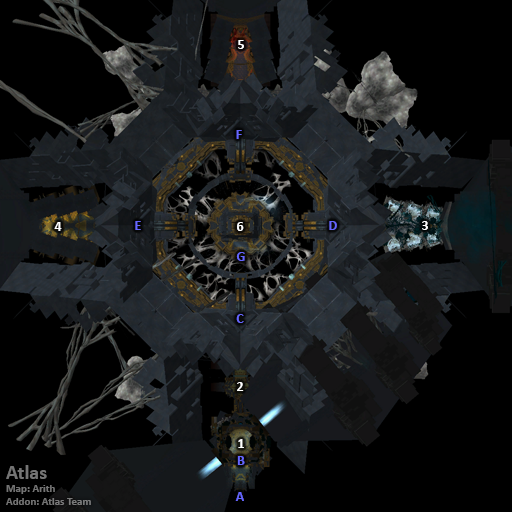
<style>
.page{position:relative;width:512px;height:512px;background:#000000}
.page>*{position:absolute;margin:0}
.t1{font:14px "Calibri-Bold";color:#ffffff}
.t2{font:14px "Calibri-Bold";color:#6666ff}
.t3{font:11px "Calibri-Bold";color:#747474}
.t4{font:20px "Calibri-Bold";color:#747474}
</style>
<div class="page">
<p class="t1" style="left:238px;top:40px;width:6px;height:9px">5</p>
<p class="t2" style="left:236px;top:130px;width:6px;height:9px">F</p>
<p class="t1" style="left:54px;top:222px;width:8px;height:9px">4</p>
<p class="t2" style="left:135px;top:221px;width:6px;height:9px">E</p>
<p class="t1" style="left:237px;top:222px;width:7px;height:9px">6</p>
<p class="t2" style="left:329px;top:221px;width:8px;height:9px">D</p>
<p class="t1" style="left:422px;top:221px;width:6px;height:9px">3</p>
<p class="t2" style="left:236px;top:252px;width:9px;height:9px">G</p>
<p class="t2" style="left:236px;top:314px;width:8px;height:9px">C</p>
<p class="t1" style="left:237px;top:382px;width:7px;height:9px">2</p>
<p class="t1" style="left:238px;top:439px;width:6px;height:9px">1</p>
<p class="t2" style="left:237px;top:456px;width:8px;height:9px">B</p>
<p class="t3" style="left:6px;top:465px;width:85px;height:40px"><span class="t4">Atlas<br></span>Map: Arith<br>Addon: Atlas Team</p>
<p class="t2" style="left:235px;top:492px;width:9px;height:9px">A</p>
</div>
